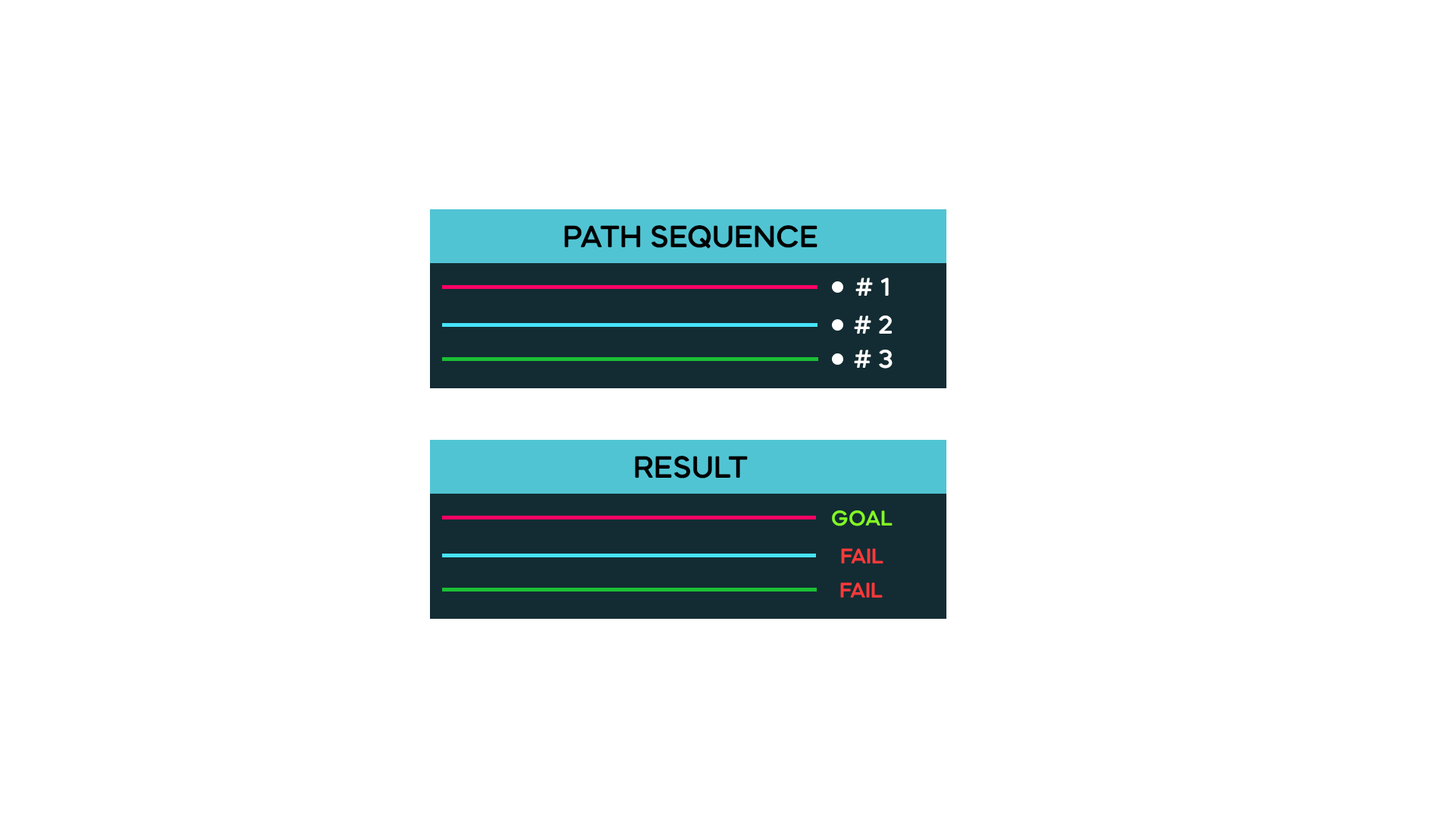
<style>
.page{position:relative;width:1456px;height:819px;background:#ffffff}
.page>*{position:absolute;margin:0}
.t1{font:31.9px "MazzardSoftM-SemiBold";color:#000000}
.t2{font:26.4px "MazzardSoftM-SemiBold";color:#ffffff}
.t3{font:22px "MazzardSoftM-SemiBold";color:#84fa24}
.t4{font:22px "MazzardSoftM-SemiBold";color:#fe3a3a}
.t5{font:22px "MazzardSoftM-SemiBold";color:#ff3939}
</style>
<div class="page">
<p class="t1" style="left:564px;top:225px;width:253px;height:24px">PATH SEQUENCE</p>
<p class="t2" style="left:855px;top:278px;width:34px;height:18px"># 1</p>
<p class="t2" style="left:854px;top:315px;width:38px;height:19px"># 2</p>
<p class="t2" style="left:854px;top:350px;width:39px;height:19px"># 3</p>
<p class="t1" style="left:635px;top:456px;width:113px;height:23px">RESULT</p>
<p class="t3" style="left:832px;top:510px;width:61px;height:16px">GOAL</p>
<p class="t4" style="left:841px;top:548px;width:42px;height:15px">FAIL</p>
<p class="t5" style="left:840px;top:582px;width:43px;height:16px">FAIL</p>
</div>
